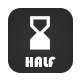
<style>
.page{position:relative;width:80px;height:80px;background:#ffffff}
.page>*{position:absolute;margin:0}
.t1{font:15px "Bauhaus93";color:#ffffff}
</style>
<div class="page">
<p class="t1" style="left:25px;top:56px;width:31px;height:11px">HALF</p>
</div>
